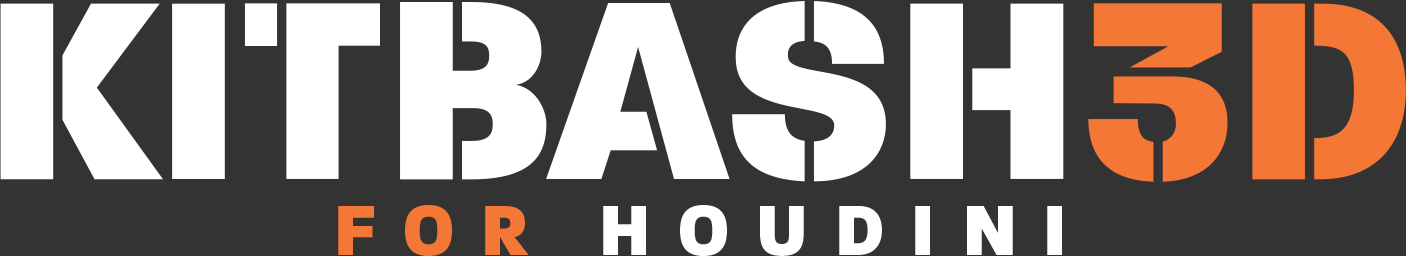
<style>
.page{position:relative;width:1406px;height:256px;background:#333333}
.page>*{position:absolute;margin:0}
.t1{font:274.3px/137.1px "ParalucentStencil-Heavy";color:#ffffff}
.t2{font:274.3px/137.1px "ParalucentStencil-Heavy";color:#f47735}
.t3{font:76.2px/76.2px "Paralucent-Heavy";letter-spacing:0.35em;color:#f47735}
.t4{font:76.2px/76.2px "Paralucent-Heavy";letter-spacing:0.35em;color:#ffffff}
</style>
<div class="page">
<p class="t1" style="left:0px;top:1px;width:1406px;height:255px;text-align:center">KITBASH<span class="t2">3D<br></span><span class="t3">FOR</span><span class="t4"> HOUDINI</span></p>
</div>
